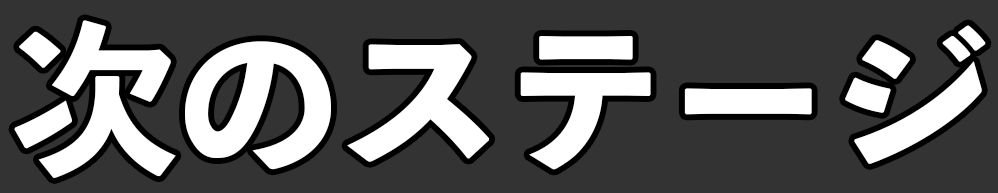
<style>
.page{position:relative;width:998px;height:193px;background:#333333}
.page>*{position:absolute;margin:0}
.t1{font:164.7px "Toppan-BunkyuMidashiGoStd-EB";letter-spacing:-0.02em;color:#ffffff}
</style>
<div class="page">
<p class="t1" style="left:14px;top:20px;width:972px;height:158px">次のステージ</p>
</div>
